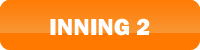
<style>
.page{position:relative;width:200px;height:50px;background:#ff7900}
.page>*{position:absolute;margin:0}
.t1{font:24px "FranklinGothic-Heavy";color:#ffffff}
</style>
<div class="page">
<p class="t1" style="left:50px;top:18px;width:100px;height:18px">INNING 2</p>
</div>
